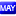
<style>
.page{position:relative;width:16px;height:16px}
.page>*{position:absolute;margin:0}
.t1{font:9px "ArialNarrow";color:#fefefe}
</style>
<div class="page">
<p class="t1" style="left:0px;top:5px;width:16px;height:6px">MAY</p>
</div>
